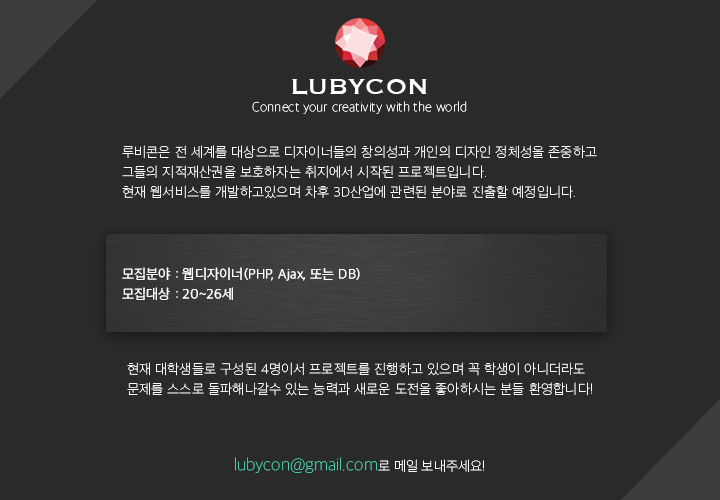
<style>
.page{position:relative;width:720px;height:500px;background:#2a2a2a}
.page>*{position:absolute;margin:0}
.t1{font:28px "Copperplate";color:#ffffff}
.t2{font:14px "AppleSDGothicNeo-Thin";color:#ffffff}
.t3{font:14px/20px "AppleSDGothicNeo-Thin";letter-spacing:0.01em;color:#ffffff}
.t4{font:14px/20px "AppleSDGothicNeo-Light";letter-spacing:0.01em;color:#ffffff}
.t5{font:18px "AppleSDGothicNeo-Thin";color:#48cfad}
</style>
<div class="page">
<p class="t1" style="left:292px;top:79px;width:135px;height:16px">LUBYCON</p>
<p class="t2" style="left:252px;top:101px;width:215px;height:13px">Connect your creativity with the world</p>
<p class="t3" style="left:122px;top:145px;width:475px;height:54px">루비콘은 전 세계를 대상으로 디자이너들의 창의성과 개인의 디자인 정체성을 존중하고<br>그들의 지적재산권을 보호하자는 취지에서 시작된 프로젝트입니다.<br>현재 웹서비스를 개발하고있으며 차후 3D산업에 관련된 분야로 진출할 예정입니다.</p>
<p class="t4" style="left:122px;top:267px;width:238px;height:33px">모집분야 : 웹디자이너(PHP, Ajax, 또는 DB)<br>모집대상 : 20~26세</p>
<p class="t3" style="left:127px;top:362px;width:465px;height:34px">현재 대학생들로 구성된 4명이서 프로젝트를 진행하고 있으며 꼭 학생이 아니더라도<br>문제를 스스로 돌파해나갈수 있는 능력과 새로운 도전을 좋아하시는 분들 환영합니다!</p>
<p class="t5" style="left:235px;top:457px;width:249px;height:16px">lubycon@gmail.com<span class="t2">로 메일 보내주세요!</span></p>
</div>
